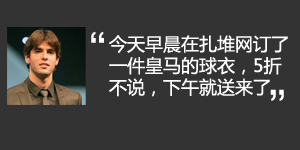
<style>
.page{position:relative;width:300px;height:150px;background:#333333}
.page>*{position:absolute;margin:0}
.t1{font:36px "SimHei";color:#ffffff}
.t2{font:18px "MicrosoftYaHei";color:#ffffff}
</style>
<div class="page">
<p class="t1" style="left:91px;top:31px;width:13px;height:12px">“</p>
<p class="t2" style="left:109px;top:35px;width:179px;height:62px">今天早晨在扎堆网订了一件皇马的球衣，5折不说，下午就送来了</p>
<p class="t1" style="left:270px;top:89px;width:14px;height:12px">”</p>
</div>
